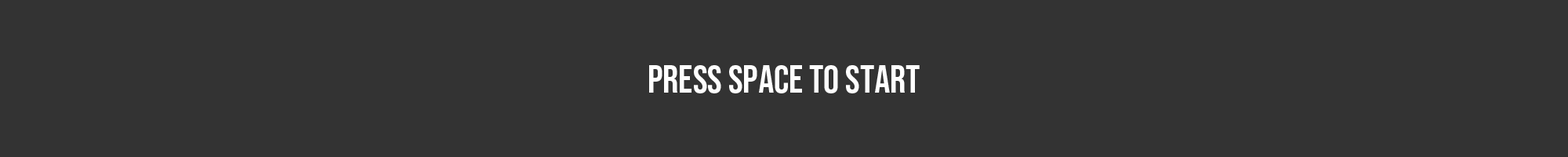
<style>
.page{position:relative;width:1568px;height:157px;background:#333333}
.page>*{position:absolute;margin:0}
.t1{font:9.4px "BebasNeue-Regular";color:#ffffff}
</style>
<div class="page">
<p class="t1" style="left:649px;top:65px;width:271px;height:28px">Press SPACE to Start</p>
</div>
